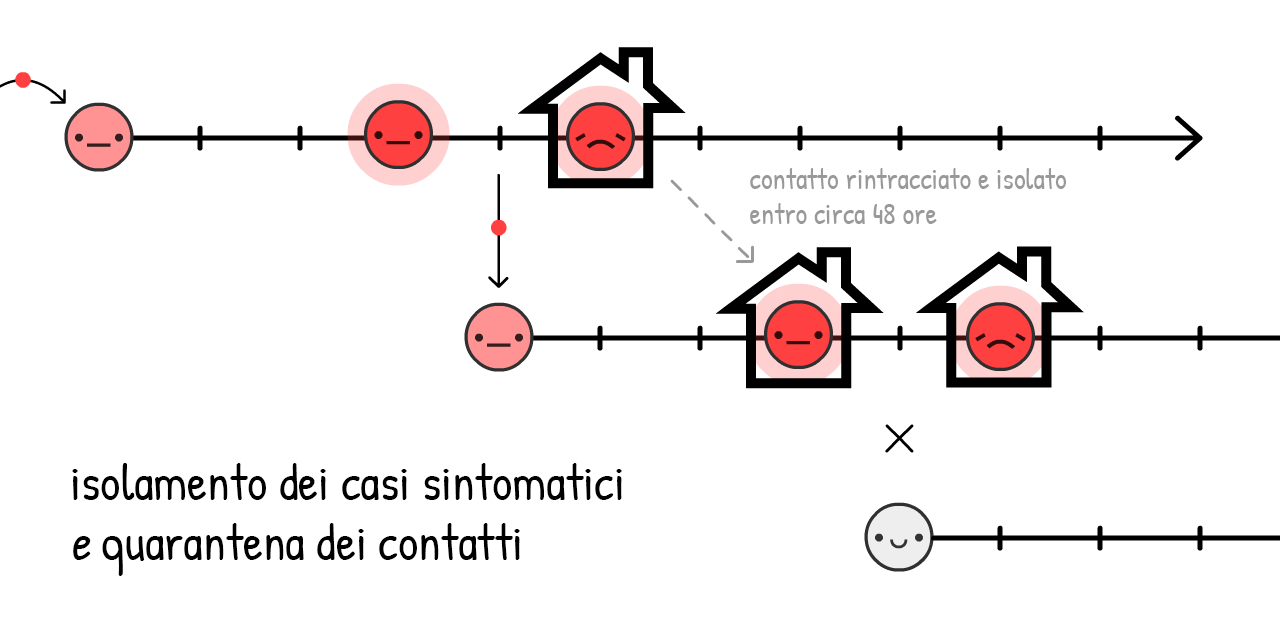
<style>
.page{position:relative;width:1280px;height:640px;background:#ffffff}
.page>*{position:absolute;margin:0}
.t1{font:29.1px "PatrickHand-Regular";color:#999999}
.t2{font:50px "PatrickHand-Regular";color:#000000}
.t3{font:50px "PatrickHand-Regular";color:#000000;font-style:italic}
</style>
<div class="page">
<p class="t1" style="left:750px;top:168px;width:316px;height:56px">contatto rintracciato e isolato<br>entro circa 48 ore</p>
<p class="t2" style="left:72px;top:463px;width:550px;height:113px">isolamento dei casi sintomatici<br><span class="t3">e </span>quarantena dei contatti</p>
</div>
